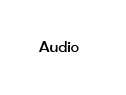
<style>
.page{position:relative;width:126px;height:95px;background:#ffffff}
.page>*{position:absolute;margin:0}
.t1{font:16px "BerlinSansFB-Reg";color:#000000}
</style>
<div class="page">
<p class="t1" style="left:39px;top:41px;width:40px;height:11px">Audio</p>
</div>
